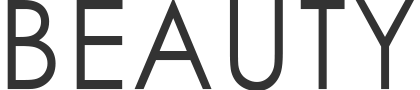
<style>
.page{position:relative;width:420px;height:90px;background:#ffffff}
.page>*{position:absolute;margin:0}
.t1{font:123.8px "LevenimMT";letter-spacing:0.05em;color:#333333;scale:0.9 1}
</style>
<div class="page">
<p class="t1" style="left:7px;top:0px;width:407px;height:91px">BEAUTY</p>
</div>
